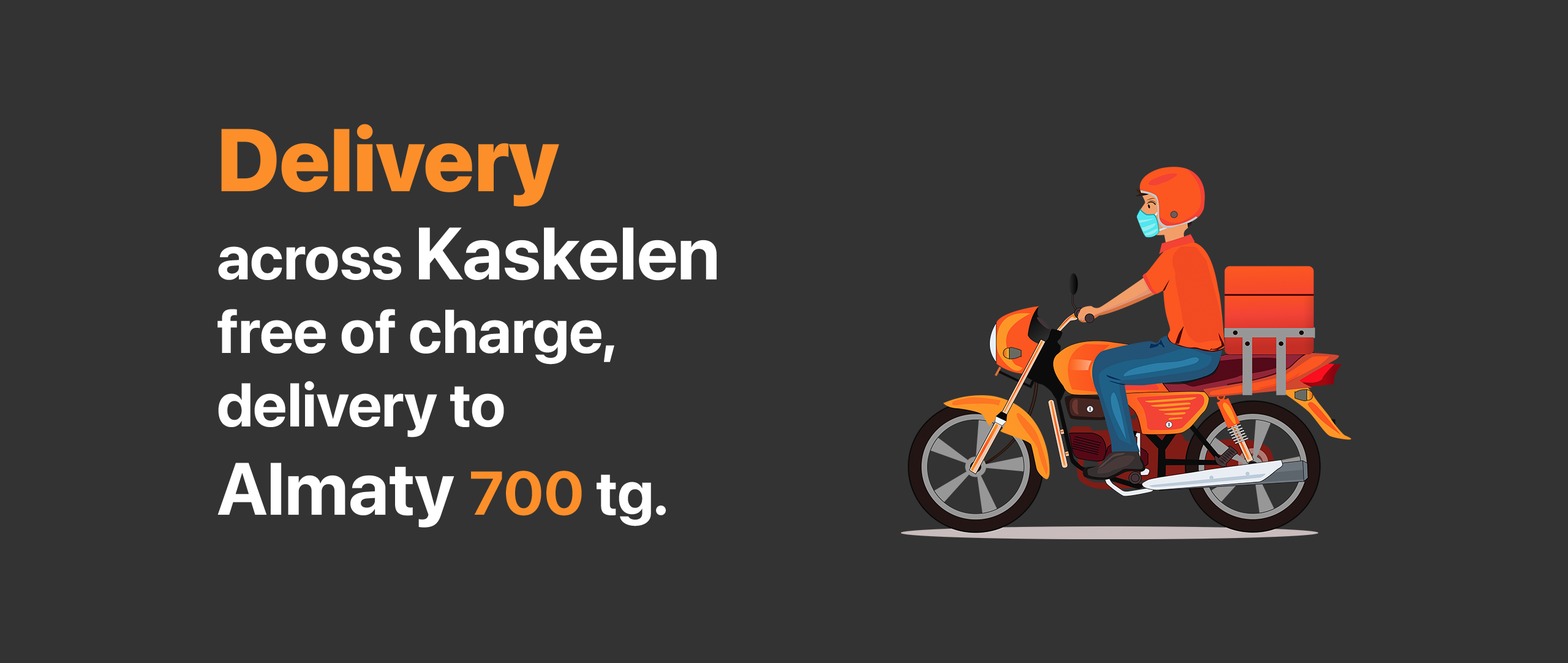
<style>
.page{position:relative;width:1568px;height:663px;background:#333333}
.page>*{position:absolute;margin:0}
.t1{font:61.3px "SFPro-Bold";color:#ffffff}
.t2{font:88.2px "SFPro-Heavy";color:#fd8f2a}
.t3{font:73.5px "SFPro-Bold";color:#ffffff}
.t4{font:61.3px "SFPro-Bold";color:#fd8f2a}
</style>
<div class="page">
<p class="t1" style="left:217px;top:124px;width:500px;height:403px"><span class="t2">Delivery<br></span>across <span class="t3">Kaskelen <br></span>free of charge, <br>delivery to <br><span class="t3">Almaty </span><span class="t4">700</span> tg.</p>
</div>
